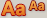
<style>
.page{position:relative;width:47px;height:18px;background:#d4d0c8}
.page>*{position:absolute;margin:0}
.t1{font:19px "Arial-BoldMT";color:#e68c39}
.t2{font:12px "Arial-BoldMT";color:#e68c39}
</style>
<div class="page">
<p class="t1" style="left:1px;top:1px;width:25px;height:15px">Aa</p>
<p class="t2" style="left:29px;top:1px;width:16px;height:9px">Aa</p>
</div>
